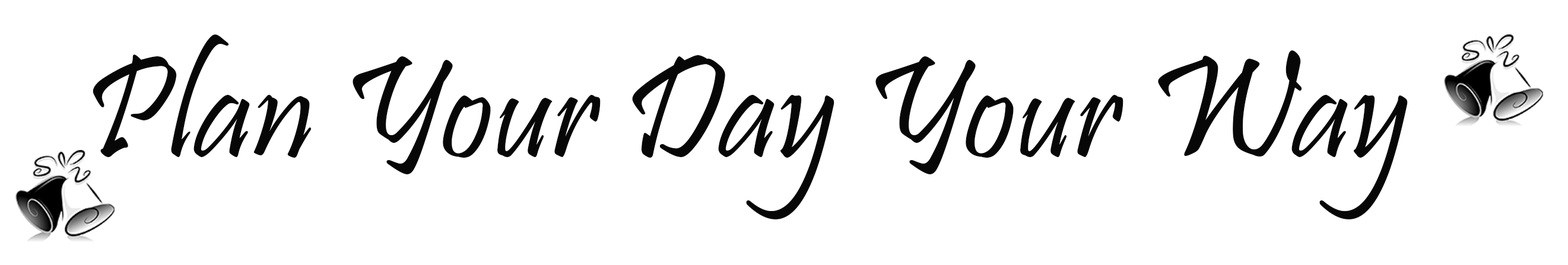
<style>
.page{position:relative;width:1568px;height:265px;background:#ffffff}
.page>*{position:absolute;margin:0}
.t1{font:148.4px "Pristina-Regular";color:#070707}
</style>
<div class="page">
<p class="t1" style="left:93px;top:34px;width:1315px;height:186px">Plan Your Day Your Way</p>
</div>
